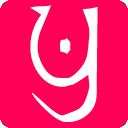
<style>
.page{position:relative;width:128px;height:128px;background:#ff0057}
.page>*{position:absolute;margin:0}
.t1{font:128px "NockerCranky";color:#ffffff}
</style>
<div class="page">
<p class="t1" style="left:30px;top:5px;width:68px;height:117px">Y</p>
</div>
